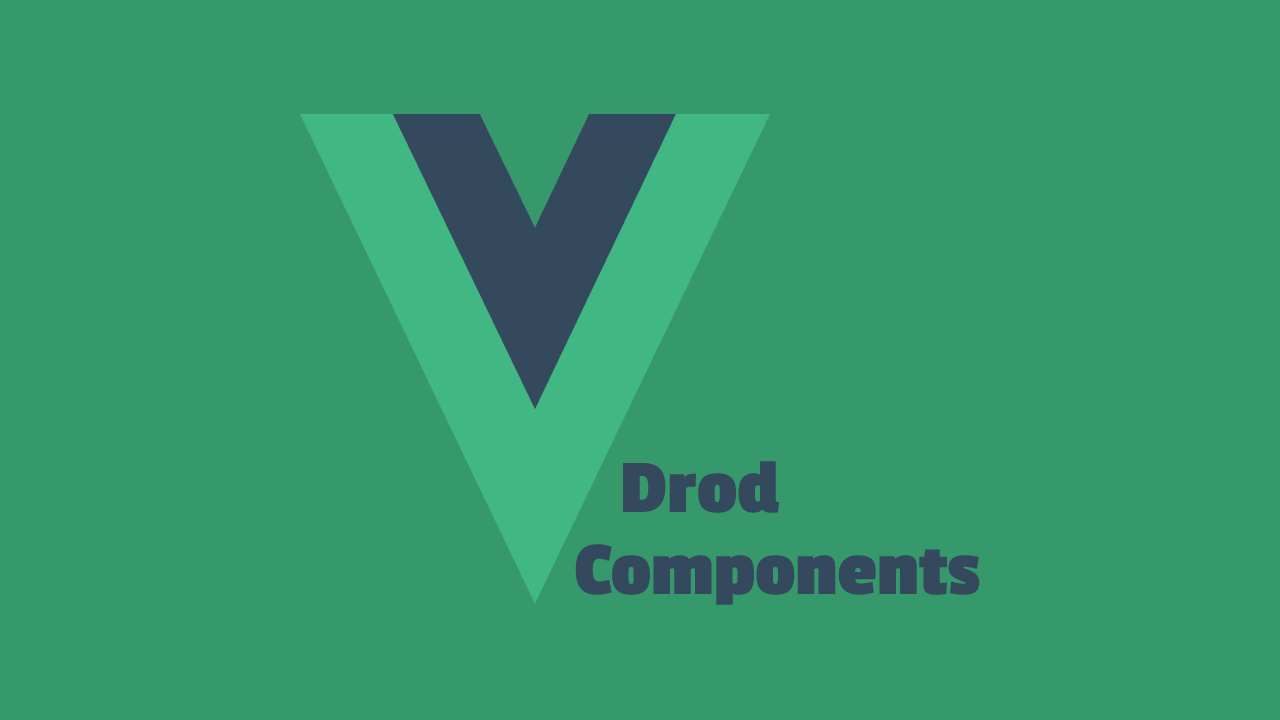
<style>
.page{position:relative;width:1280px;height:720px;background:#36996c}
.page>*{position:absolute;margin:0}
.t1{font:79px "PassionOne-Bold";color:#35495e}
</style>
<div class="page">
<p class="t1" style="left:622px;top:461px;width:158px;height:52px">Drod</p>
<p class="t1" style="left:575px;top:544px;width:405px;height:61px">Components</p>
</div>
